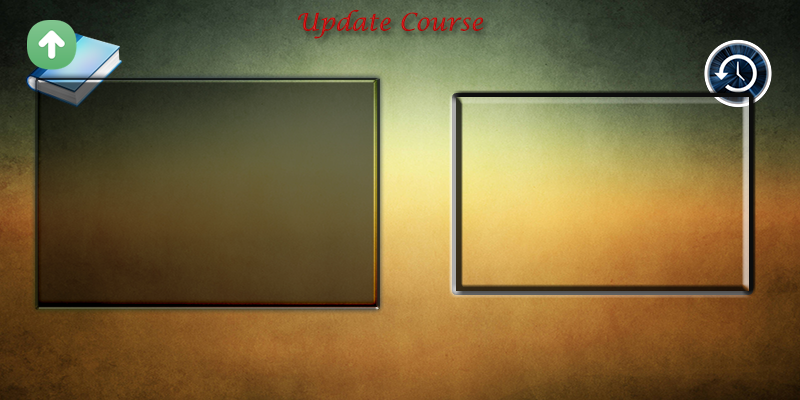
<style>
.page{position:relative;width:800px;height:400px}
.page>*{position:absolute;margin:0}
.t1{font:24px "LucidaCalligraphy-Italic";color:#bd1112}
</style>
<div class="page">
<p class="t1" style="left:298px;top:9px;width:186px;height:30px">Update Course</p>
</div>
